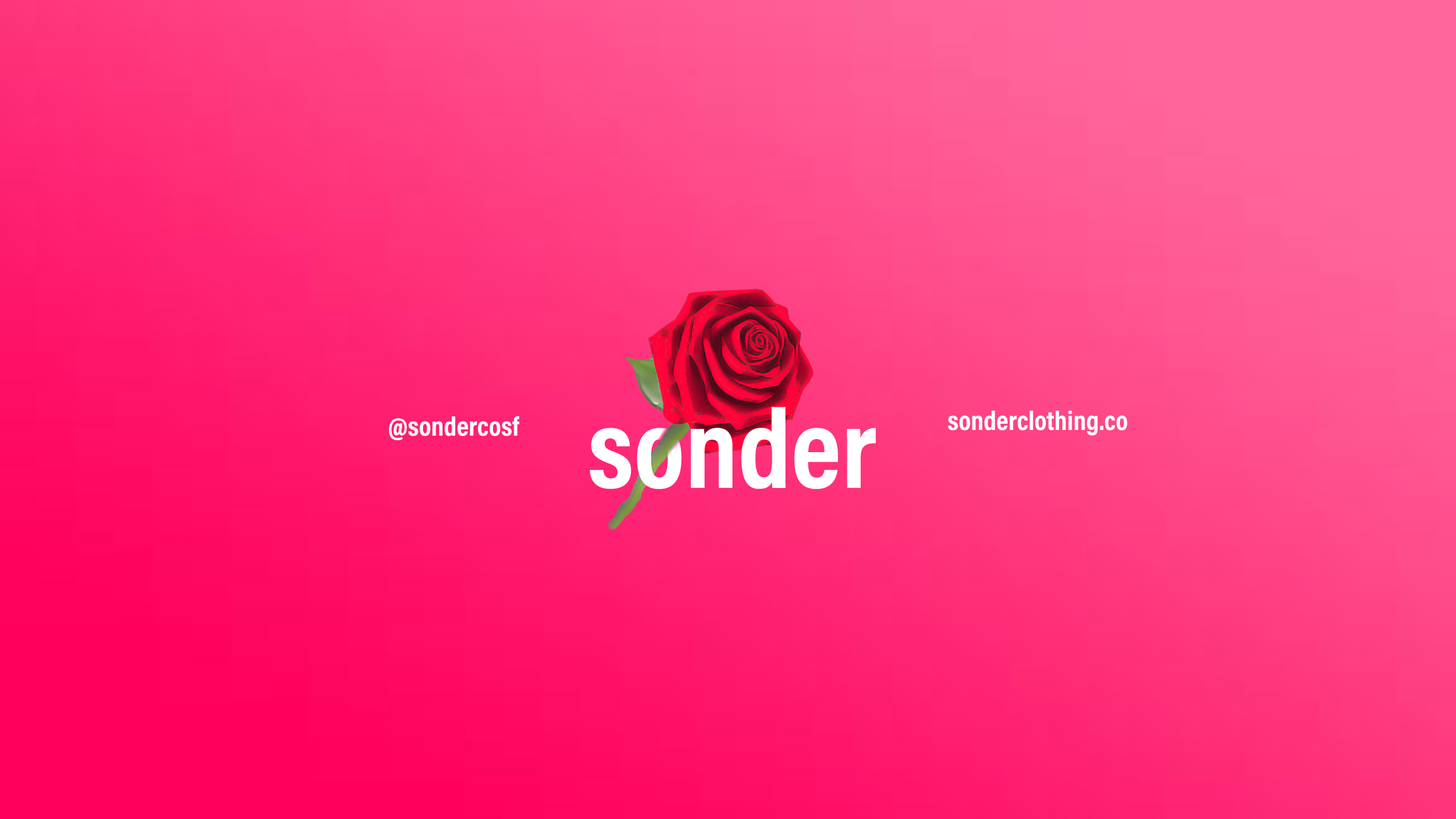
<style>
.page{position:relative;width:1456px;height:819px}
.page>*{position:absolute;margin:0}
.t1{font:27.3px "AcuminProCond-Bold";color:#ffffff}
</style>
<div class="page">
<p class="t1" style="left:948px;top:411px;width:179px;height:25px">sonderclothing.co</p>
<p class="t1" style="left:389px;top:416px;width:130px;height:24px">@sondercosf</p>
</div>
